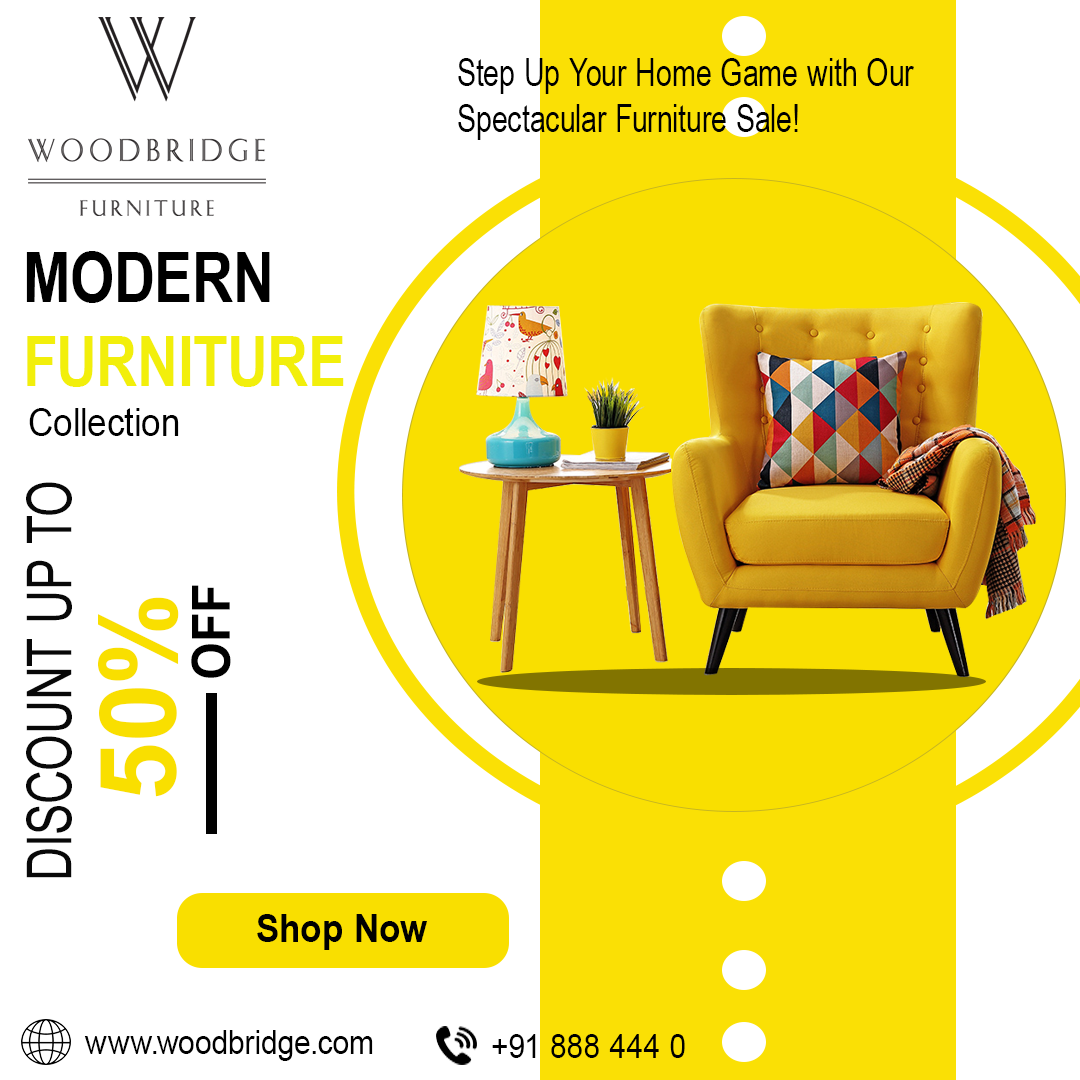
<style>
.page{position:relative;width:1080px;height:1080px;background:#ffffff}
.page>*{position:absolute;margin:0}
.t1{font:39px "ArialNarrow";letter-spacing:0.01em;color:#000000;scale:0.91 1}
.t2{font:69.9px "Arial-BoldMT";letter-spacing:0.01em;color:#f2ef0b;scale:0.81 1}
.t3{font:69.9px "Arial-BoldMT";letter-spacing:0.01em;color:#000000;scale:0.81 1}
.t4{font:39px "ArialMT";letter-spacing:0.01em;color:#000000;scale:0.91 1}
.t5{font:62.2px "ArialMT";letter-spacing:0.01em;color:#080808;scale:0.76 1}
.t6{font:52.5px "Arial-BoldMT";letter-spacing:0.01em;color:#000000;scale:0.94 1}
.t7{font:105.7px "Arial-BoldMT";letter-spacing:0.01em;color:#f9df00}
.t8{font:39px "Arial-BoldMT";letter-spacing:0.01em;color:#000000;scale:0.91 1}
.t9{font:33.3px "ArialMT";letter-spacing:0.01em;color:#000000;scale:0.91 1}
</style>
<div class="page">
<p class="t1" style="left:458px;top:58px;width:456px;height:82px">Step Up Your Home Game with Our<br>Spectacular Furniture Sale!</p>
<p class="t2" style="left:26px;top:251px;width:318px;height:136px"><span class="t3">MODERN<br></span>FURNITURE</p>
<p class="t4" style="left:29px;top:408px;width:150px;height:28px">Collection</p>
<p class="t5" style="left:26px;top:482px;width:46px;height:396px;rotate:-90deg">DISCOUNT UP TO</p>
<p class="t6" style="left:191px;top:585px;width:40px;height:93px;rotate:-90deg">OFF</p>
<p class="t7" style="left:98px;top:597px;width:81px;height:200px;rotate:-90deg">50%</p>
<p class="t8" style="left:257px;top:914px;width:170px;height:36px">Shop Now</p>
<p class="t9" style="left:84px;top:1030px;width:289px;height:31px">www.woodbridge.com</p>
<p class="t9" style="left:492px;top:1034px;width:193px;height:24px">+91 888 444 0</p>
</div>
